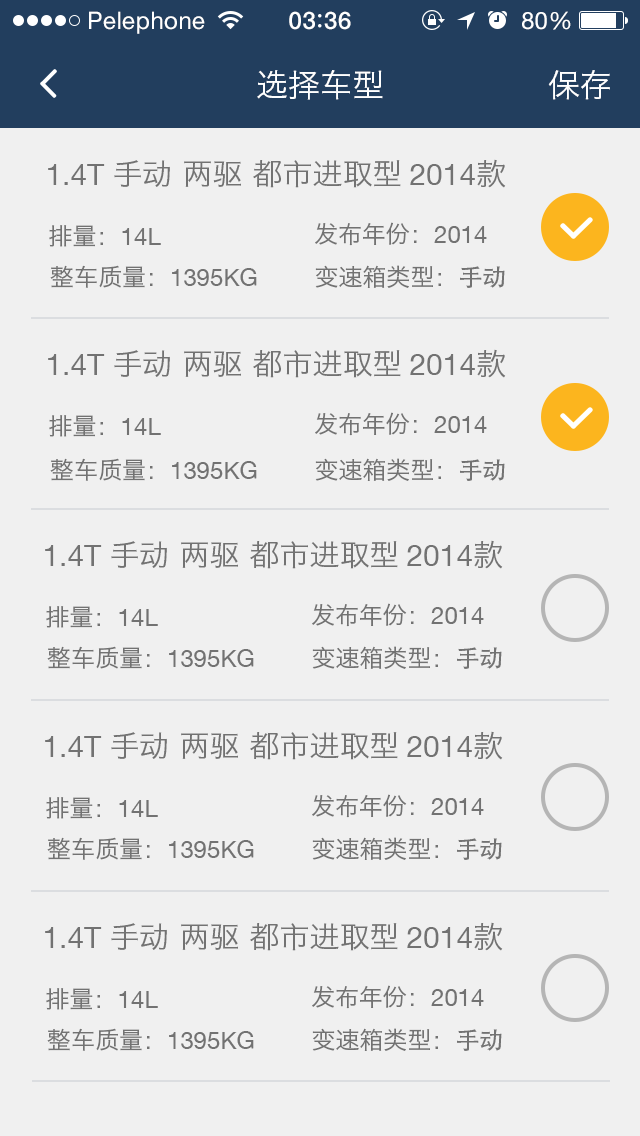
<style>
.page{position:relative;width:640px;height:1136px;background:#f0f0f0}
.page>*{position:absolute;margin:0}
.t1{font:24px "HelveticaNeue";letter-spacing:0.02em;color:#ffffff}
.t2{font:24px "HelveticaNeue-Medium";letter-spacing:0.03em;color:#ffffff}
.t3{font:32px "HiraginoSansGB-W3";color:#ffffff}
.t4{font:30px "HiraginoSansGB-W3";color:#727272}
.t5{font:30px "HelveticaNeue";color:#727272}
.t6{font:24px "HiraginoSansGB-W3";color:#727272}
.t7{font:24px "HelveticaNeue";color:#727272}
.t8{font:24px "AdobeHeitiStd-Regular";color:#727272}
</style>
<div class="page">
<p class="t1" style="left:89px;top:11px;width:116px;height:23px">Pelephone</p>
<p class="t2" style="left:289px;top:11px;width:62px;height:19px">03 36</p>
<p class="t1" style="left:522px;top:11px;width:49px;height:19px">80%</p>
<p class="t3" style="left:257px;top:70px;width:126px;height:30px">选择车型</p>
<p class="t3" style="left:548px;top:70px;width:62px;height:30px">保存</p>
<p class="t4" style="left:48px;top:159px;width:458px;height:29px"><span class="t5">1.4T </span>手动 两驱 都市进取型 <span class="t5">2014</span>款</p>
<p class="t6" style="left:315px;top:222px;width:172px;height:24px">发布年份：<span class="t7">2014</span></p>
<p class="t6" style="left:49px;top:225px;width:112px;height:22px">排量：<span class="t7">14L</span></p>
<p class="t7" style="left:50px;top:265px;width:207px;height:23px"><span class="t6">整车质量：</span>1395KG</p>
<p class="t6" style="left:315px;top:265px;width:190px;height:23px">变速箱类型：<span class="t8">手动</span></p>
<p class="t4" style="left:48px;top:349px;width:458px;height:29px"><span class="t5">1.4T </span>手动 两驱 都市进取型 <span class="t5">2014</span>款</p>
<p class="t6" style="left:315px;top:412px;width:172px;height:24px">发布年份：<span class="t7">2014</span></p>
<p class="t6" style="left:49px;top:415px;width:112px;height:22px">排量：<span class="t7">14L</span></p>
<p class="t7" style="left:50px;top:458px;width:207px;height:23px"><span class="t6">整车质量：</span>1395KG</p>
<p class="t6" style="left:315px;top:458px;width:190px;height:23px">变速箱类型：<span class="t8">手动</span></p>
<p class="t4" style="left:45px;top:540px;width:458px;height:29px"><span class="t5">1.4T </span>手动 两驱 都市进取型 <span class="t5">2014</span>款</p>
<p class="t6" style="left:46px;top:606px;width:112px;height:22px">排量：<span class="t7">14L</span></p>
<p class="t6" style="left:312px;top:603px;width:172px;height:24px">发布年份：<span class="t7">2014</span></p>
<p class="t7" style="left:47px;top:646px;width:207px;height:23px"><span class="t6">整车质量：</span>1395KG</p>
<p class="t6" style="left:312px;top:646px;width:190px;height:23px">变速箱类型：<span class="t8">手动</span></p>
<p class="t4" style="left:45px;top:731px;width:458px;height:29px"><span class="t5">1.4T </span>手动 两驱 都市进取型 <span class="t5">2014</span>款</p>
<p class="t6" style="left:46px;top:797px;width:112px;height:22px">排量：<span class="t7">14L</span></p>
<p class="t6" style="left:312px;top:794px;width:172px;height:24px">发布年份：<span class="t7">2014</span></p>
<p class="t7" style="left:47px;top:837px;width:207px;height:23px"><span class="t6">整车质量：</span>1395KG</p>
<p class="t6" style="left:312px;top:837px;width:190px;height:23px">变速箱类型：<span class="t8">手动</span></p>
<p class="t4" style="left:45px;top:922px;width:458px;height:29px"><span class="t5">1.4T </span>手动 两驱 都市进取型 <span class="t5">2014</span>款</p>
<p class="t6" style="left:46px;top:988px;width:112px;height:22px">排量：<span class="t7">14L</span></p>
<p class="t6" style="left:312px;top:985px;width:172px;height:24px">发布年份：<span class="t7">2014</span></p>
<p class="t7" style="left:47px;top:1028px;width:207px;height:23px"><span class="t6">整车质量：</span>1395KG</p>
<p class="t6" style="left:312px;top:1028px;width:190px;height:23px">变速箱类型：<span class="t8">手动</span></p>
</div>
